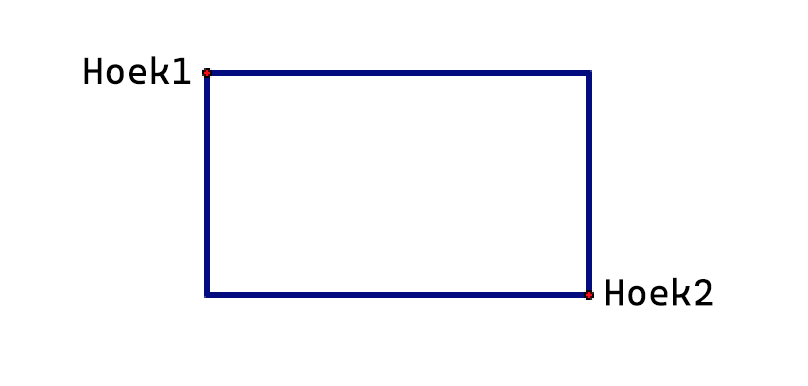
<style>
.page{position:relative;width:808px;height:386px;background:#ffffff}
.page>*{position:absolute;margin:0}
.t1{font:37.9px "CascadiaCode";color:#000000}
</style>
<div class="page">
<p class="t1" style="left:84px;top:56px;width:107px;height:29px">Hoek1</p>
<p class="t1" style="left:606px;top:277px;width:107px;height:29px">Hoek2</p>
</div>
